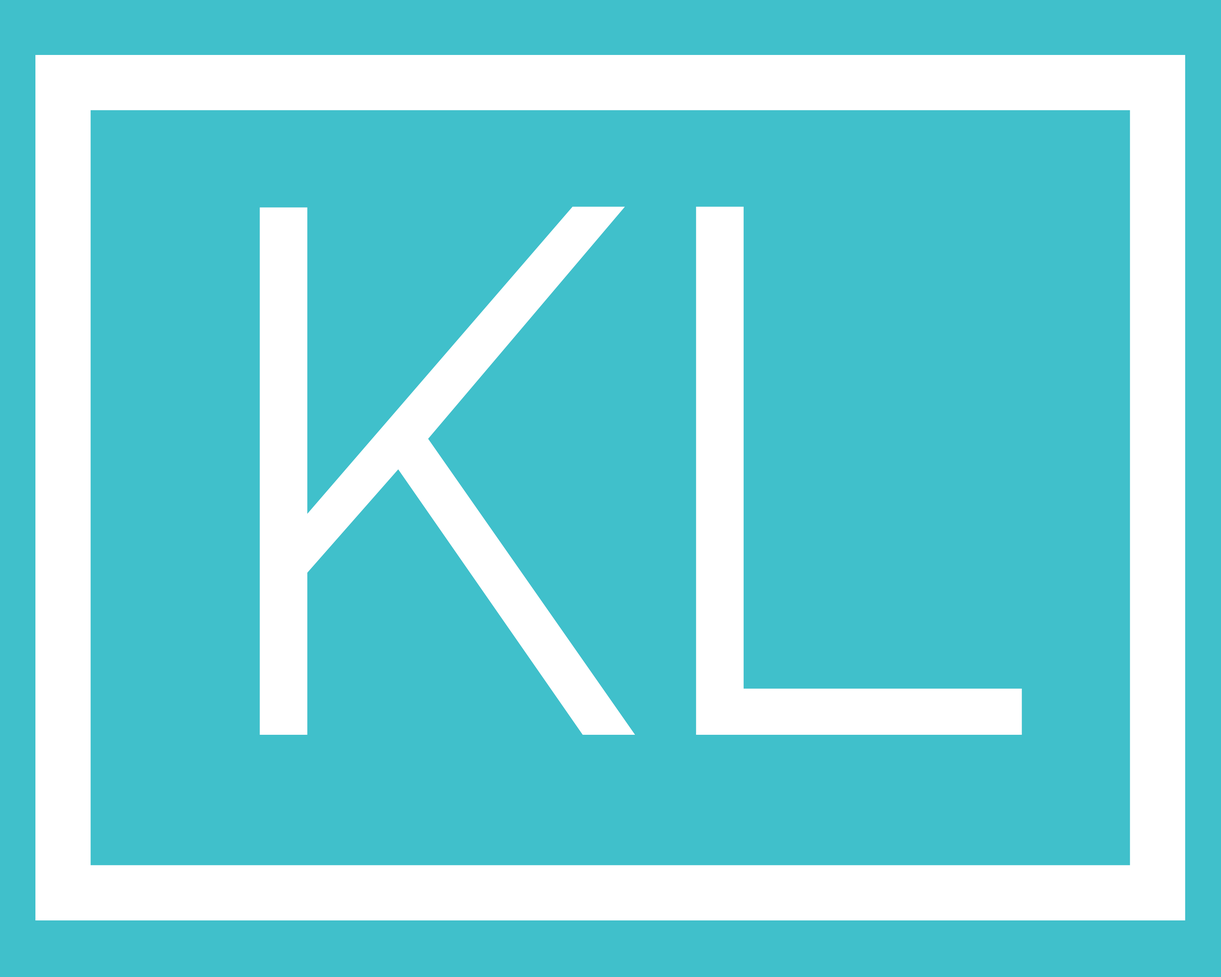
<style>
.page{position:relative;width:1221px;height:977px;background:#40c0cb}
.page>*{position:absolute;margin:0}
.t1{font:743.5px "Raleway-Regular";color:#ffffff;scale:0.91 1}
</style>
<div class="page">
<p class="t1" style="left:260px;top:206px;width:762px;height:529px">KL</p>
</div>
